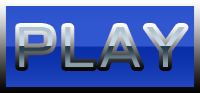
<style>
.page{position:relative;width:200px;height:93px}
.page>*{position:absolute;margin:0}
.t1{font:60px "EurostileRegular";letter-spacing:0.1em;scale:1.11 1}
</style>
<div class="page">
<p class="t1" style="left:19px;top:27px;width:166px;height:40px">PLAY</p>
</div>
